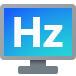
<style>
.page{position:relative;width:76px;height:76px;background:#ffffff}
.page>*{position:absolute;margin:0}
.t1{font:42px "Gadugi-Bold";color:#ffffff}
</style>
<div class="page">
<p class="t1" style="left:14px;top:17px;width:49px;height:30px">Hz</p>
</div>
